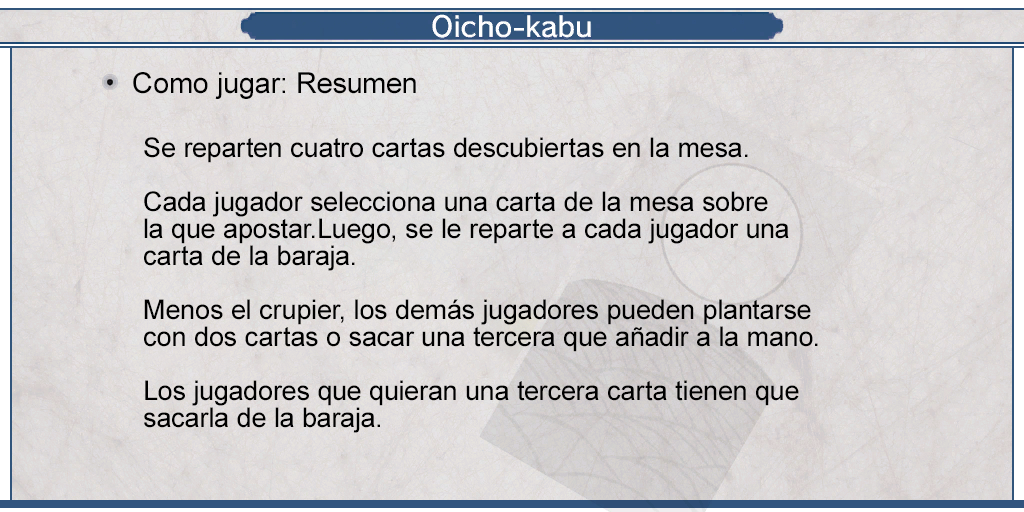
<style>
.page{position:relative;width:1024px;height:512px}
.page>*{position:absolute;margin:0}
.t1{font:29px "ArialMT";color:#000000}
.t2{font:27px/27px "ArialMT";color:#000000}
</style>
<div class="page">
<p class="t1" style="left:133px;top:72px;width:283px;height:27px">Como jugar: Resumen</p>
<p class="t2" style="left:144px;top:137px;width:674px;height:296px">Se reparten cuatro cartas descubiertas en la mesa.<br><br>Cada jugador selecciona una carta de la mesa sobre <br>la que apostar.Luego, se le reparte a cada jugador una <br>carta de la baraja.<br><br>Menos el crupier, los demás jugadores pueden plantarse <br>con dos cartas o sacar una tercera que añadir a la mano.<br><br>Los jugadores que quieran una tercera carta tienen que <br>sacarla de la baraja.</p>
</div>
